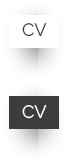
<style>
.page{position:relative;width:68px;height:162px;background:#ffffff}
.page>*{position:absolute;margin:0}
.t1{font:18px "Raleway-Regular";color:#3c3c3c}
.t2{font:18px "Raleway-Regular";color:#ffffff}
</style>
<div class="page">
<p class="t1" style="left:22px;top:23px;width:25px;height:14px">CV</p>
<p class="t2" style="left:22px;top:105px;width:25px;height:14px">CV</p>
</div>
